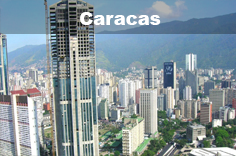
<style>
.page{position:relative;width:236px;height:156px}
.page>*{position:absolute;margin:0}
.t1{font:18px "Arial-Black";color:#ffffff}
</style>
<div class="page">
<p class="t1" style="left:80px;top:12px;width:81px;height:13px">Caracas</p>
</div>
